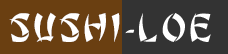
<style>
.page{position:relative;width:228px;height:54px;background:#6a3f11}
.page>*{position:absolute;margin:0}
.t1{font:50px "BonzaiRegular";color:#ffffff}
</style>
<div class="page">
<p class="t1" style="left:9px;top:12px;width:202px;height:30px">SUSHI-LOE</p>
</div>
